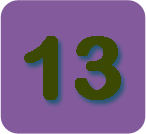
<style>
.page{position:relative;width:146px;height:134px;background:#835b9c}
.page>*{position:absolute;margin:0}
.t1{font:86.1px "ArialRoundedMTBold";letter-spacing:-0.01em;color:#3c4902;font-weight:bold}
</style>
<div class="page">
<p class="t1" style="left:24px;top:36px;width:97px;height:64px">13</p>
</div>
